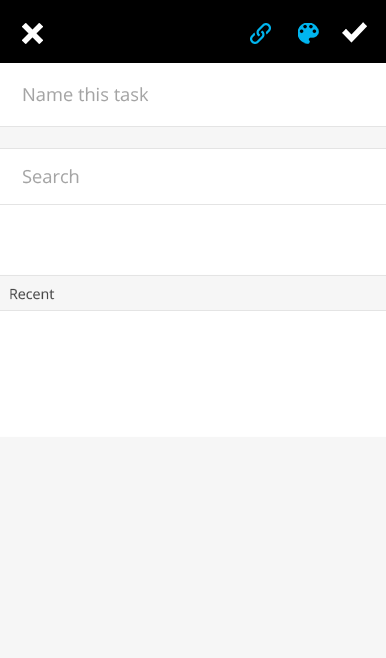
<style>
.page{position:relative;width:386px;height:658px;background:#ffffff}
.page>*{position:absolute;margin:0}
.t1{font:18px "OpenSans";color:#a4a4a4}
.t2{font:14px "OpenSans";color:#474747}
</style>
<div class="page">
<p class="t1" style="left:23px;top:87px;width:126px;height:15px">Name this task</p>
<p class="t1" style="left:23px;top:169px;width:56px;height:15px">Search</p>
<p class="t2" style="left:10px;top:288px;width:45px;height:12px">Recent</p>
</div>
